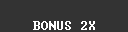
<style>
.page{position:relative;width:128px;height:32px;background:#333333}
.page>*{position:absolute;margin:0}
.t1{font:12px "Terminal";color:#ffffff}
</style>
<div class="page">
<p class="t1" style="left:33px;top:21px;width:62px;height:9px">BONUS 2X</p>
</div>
